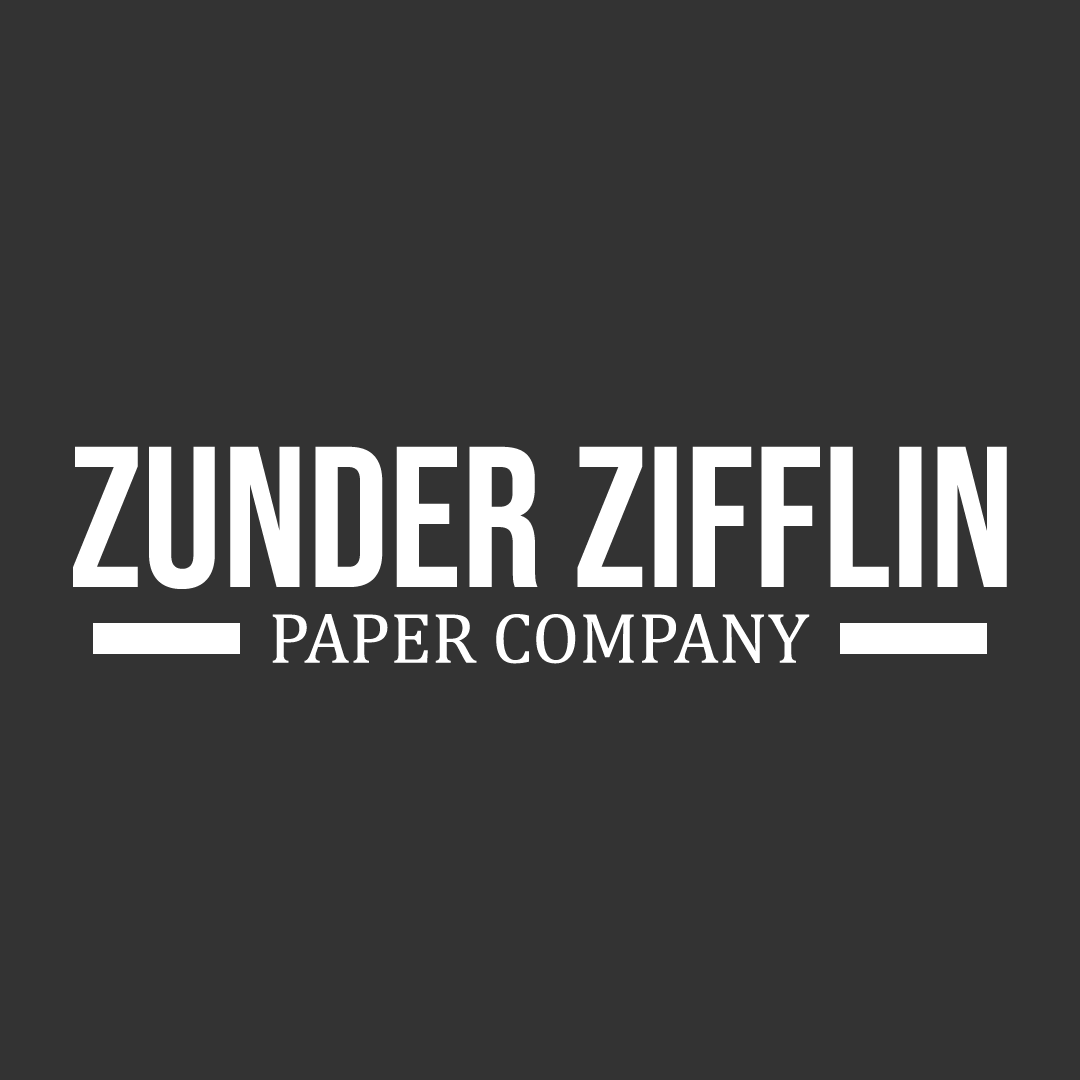
<style>
.page{position:relative;width:1080px;height:1080px;background:#333333}
.page>*{position:absolute;margin:0}
.t1{font:200px "BebasNeue-Regular";color:#ffffff}
.t2{font:72px "Cambria";color:#ffffff}
</style>
<div class="page">
<p class="t1" style="left:73px;top:446px;width:934px;height:143px">Zunder ZiFFLIn</p>
<p class="t2" style="left:272px;top:614px;width:538px;height:50px">PAPER COMPANY</p>
</div>
